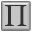
<style>
.page{position:relative;width:32px;height:32px;background:#c5c5c5}
.page>*{position:absolute;margin:0}
.t1{font:31.2px "TimesNewRomanPSMT";letter-spacing:-0.075em;color:#333333}
</style>
<div class="page">
<p class="t1" style="left:5px;top:5px;width:22px;height:21px">Π</p>
</div>
